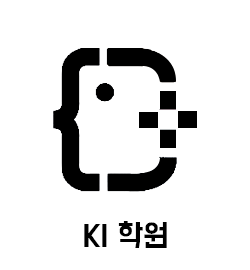
<style>
.page{position:relative;width:250px;height:270px;background:#ffffff}
.page>*{position:absolute;margin:0}
.t1{font:27.1px "BMDoHyeon";color:#000000;text-transform:uppercase}
</style>
<div class="page">
<p class="t1" style="left:84px;top:221px;width:83px;height:27px">ki 학원</p>
</div>
